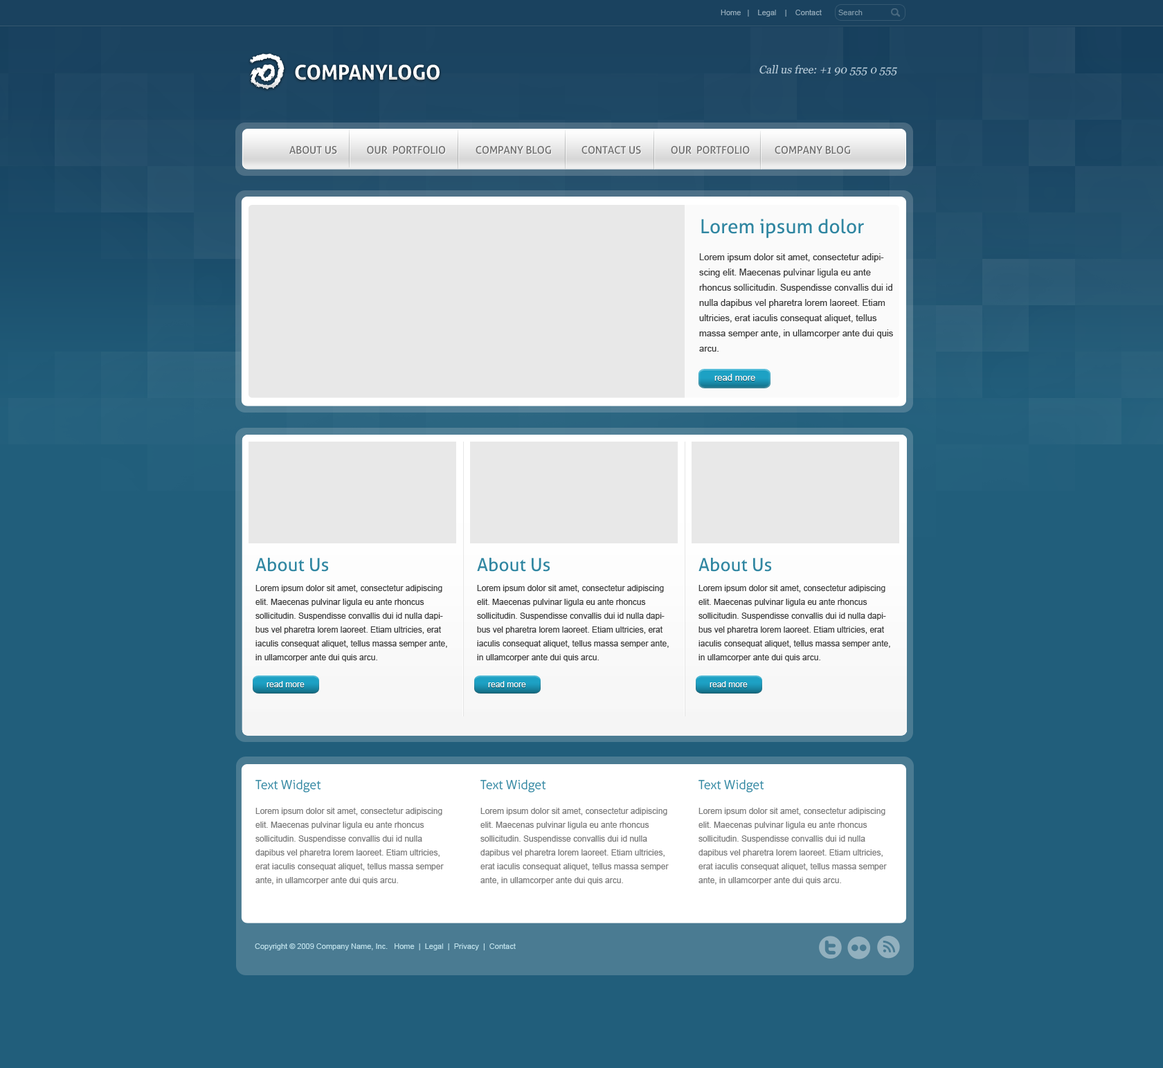
<style>
.page{position:relative;width:1163px;height:1068px;background:#215e7b}
.page>*{position:absolute;margin:0}
.t1{font:7.6px "ArialMT";color:#93aab9}
.t2{font:7.6px "ArialMT";color:#7c96a7}
.t3{font:44.5px "Chalkduster";color:#ffffff}
.t4{font:20.5px "Aller-Bold";color:#ffffff;text-transform:uppercase}
.t5{font:11.1px "Georgia";color:#bacdda;font-style:italic}
.t6{font:10.4px "Aller";color:#6b6b6b;text-transform:uppercase}
.t7{font:19.4px "Aller";color:#3086a1}
.t8{font:9px/15.2px "ArialMT";color:#3f3f3f}
.t9{font:9px "ArialMT";color:#ffffff}
.t10{font:18px "Aller";color:#3086a1}
.t11{font:8.3px/13.8px "ArialMT";color:#3f3f3f}
.t12{font:8.3px "ArialMT";color:#ffffff}
.t13{font:12.5px "Aller-Light";color:#3086a1}
.t14{font:8.3px/13.8px "ArialMT";color:#7b7b7b}
.t15{font:7.6px "ArialMT";color:#bee0ea}
</style>
<div class="page">
<p class="t1" style="left:721px;top:10px;width:101px;height:7px">Home   |    Legal    |    Contact</p>
<p class="t2" style="left:838px;top:10px;width:25px;height:5px">Search</p>
<p class="t3" style="left:250px;top:53px;width:35px;height:36px;rotate:180deg">@</p>
<p class="t4" style="left:295px;top:64px;width:145px;height:16px">companylogo</p>
<p class="t5" style="left:759px;top:64px;width:138px;height:11px">Call us free: +1 90 555 0 555</p>
<p class="t6" style="left:289px;top:145px;width:562px;height:9px">about us            our  portfolio            company blog            contact us            our  portfolio          company blog</p>
<p class="t7" style="left:701px;top:219px;width:163px;height:19px">Lorem ipsum dolor</p>
<p class="t8" style="left:699px;top:253px;width:194px;height:99px">Lorem ipsum dolor sit amet, consectetur adipiscing elit. Maecenas pulvinar ligula eu ante rhoncus sollicitudin. Suspendisse convallis dui id nulla dapibus vel pharetra lorem laoreet. Etiam ultricies, erat iaculis consequat aliquet, tellus massa semper ante, in ullamcorper ante dui quis arcu.</p>
<p class="t9" style="left:714px;top:374px;width:41px;height:7px">read more</p>
<p class="t10" style="left:255px;top:557px;width:74px;height:15px">About Us</p>
<p class="t10" style="left:477px;top:557px;width:73px;height:15px">About Us</p>
<p class="t10" style="left:699px;top:557px;width:73px;height:15px">About Us</p>
<p class="t11" style="left:255px;top:585px;width:192px;height:77px">Lorem ipsum dolor sit amet, consectetur adipiscing elit. Maecenas pulvinar ligula eu ante rhoncus sollicitudin. Suspendisse convallis dui id nulla dapibus vel pharetra lorem laoreet. Etiam ultricies, erat iaculis consequat aliquet, tellus massa semper ante, in ullamcorper ante dui quis arcu.</p>
<p class="t11" style="left:477px;top:585px;width:192px;height:77px">Lorem ipsum dolor sit amet, consectetur adipiscing elit. Maecenas pulvinar ligula eu ante rhoncus sollicitudin. Suspendisse convallis dui id nulla dapibus vel pharetra lorem laoreet. Etiam ultricies, erat iaculis consequat aliquet, tellus massa semper ante, in ullamcorper ante dui quis arcu.</p>
<p class="t11" style="left:699px;top:585px;width:191px;height:77px">Lorem ipsum dolor sit amet, consectetur adipiscing elit. Maecenas pulvinar ligula eu ante rhoncus sollicitudin. Suspendisse convallis dui id nulla dapibus vel pharetra lorem laoreet. Etiam ultricies, erat iaculis consequat aliquet, tellus massa semper ante, in ullamcorper ante dui quis arcu.</p>
<p class="t12" style="left:267px;top:681px;width:38px;height:6px">read more</p>
<p class="t12" style="left:488px;top:681px;width:38px;height:6px">read more</p>
<p class="t12" style="left:710px;top:681px;width:38px;height:6px">read more</p>
<p class="t13" style="left:255px;top:780px;width:66px;height:13px">Text Widget</p>
<p class="t13" style="left:480px;top:780px;width:66px;height:13px">Text Widget</p>
<p class="t13" style="left:699px;top:780px;width:65px;height:13px">Text Widget</p>
<p class="t14" style="left:255px;top:808px;width:189px;height:77px">Lorem ipsum dolor sit amet, consectetur adipiscing elit. Maecenas pulvinar ligula eu ante rhoncus sollicitudin. Suspendisse convallis dui id nulla dapibus vel pharetra lorem laoreet. Etiam ultricies, erat iaculis consequat aliquet, tellus massa semper ante, in ullamcorper ante dui quis arcu.</p>
<p class="t14" style="left:480px;top:808px;width:189px;height:77px">Lorem ipsum dolor sit amet, consectetur adipiscing elit. Maecenas pulvinar ligula eu ante rhoncus sollicitudin. Suspendisse convallis dui id nulla dapibus vel pharetra lorem laoreet. Etiam ultricies, erat iaculis consequat aliquet, tellus massa semper ante, in ullamcorper ante dui quis arcu.</p>
<p class="t14" style="left:699px;top:808px;width:188px;height:77px">Lorem ipsum dolor sit amet, consectetur adipiscing elit. Maecenas pulvinar ligula eu ante rhoncus sollicitudin. Suspendisse convallis dui id nulla dapibus vel pharetra lorem laoreet. Etiam ultricies, erat iaculis consequat aliquet, tellus massa semper ante, in ullamcorper ante dui quis arcu.</p>
<p class="t15" style="left:255px;top:944px;width:261px;height:7px">Copyright © 2009 Company Name, Inc.   Home  |  Legal  |  Privacy  |  Contact</p>
</div>
